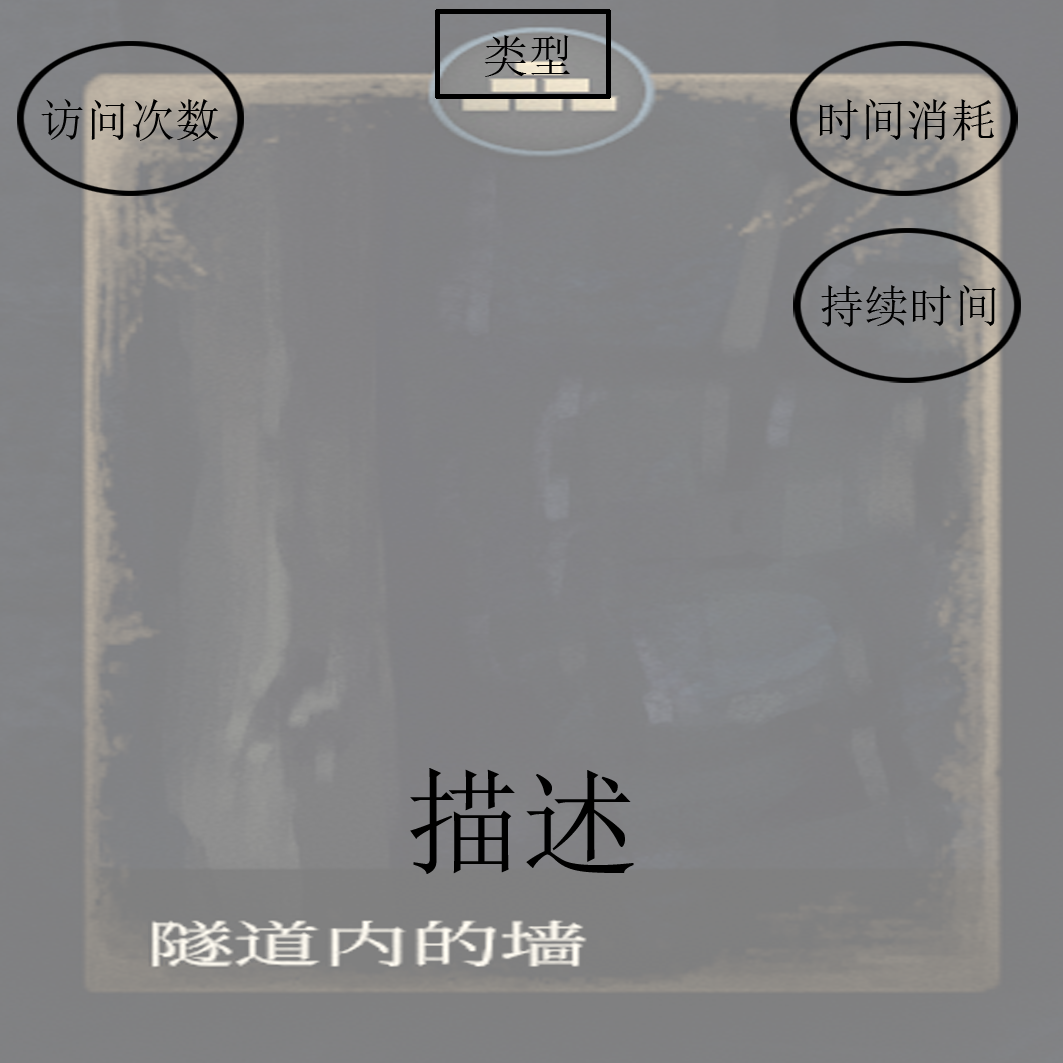
<style>
.page{position:relative;width:1063px;height:1063px}
.page>*{position:absolute;margin:0}
.t1{font:45px "SimSun";color:#000000}
.t2{font:116.4px "SimSun";color:#000000}
</style>
<div class="page">
<p class="t1" style="left:41px;top:99px;width:177px;height:42px">访问次数</p>
<p class="t1" style="left:819px;top:99px;width:175px;height:42px">时间消耗</p>
<p class="t1" style="left:821px;top:285px;width:175px;height:42px">持续时间</p>
<p class="t2" style="left:410px;top:768px;width:224px;height:106px">描述</p>
</div>
